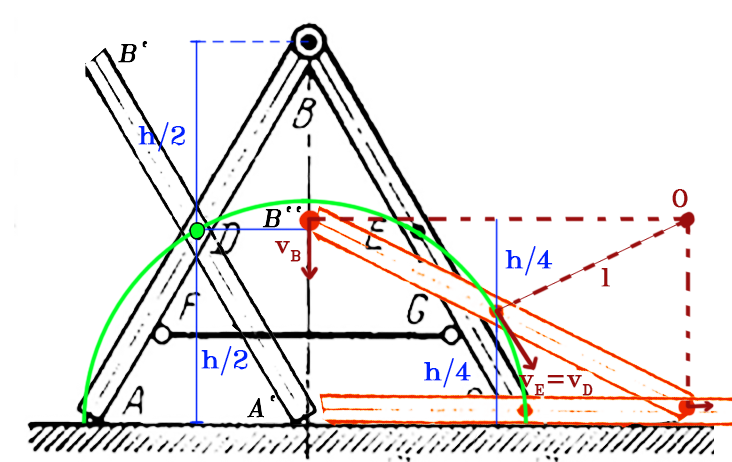
<style>
.page{position:relative;width:732px;height:462px;background:#ffffff}
.page>*{position:absolute;margin:0}
.t1{font:24px "SWRomnt";color:#000000;font-weight:bold;font-style:italic}
.t2{font:24px "SWRomnt";color:#0022ff;font-weight:bold}
.t3{font:24px "SWRomnt";color:#0022ff;font-weight:bold;scale:0.59 1}
.t4{font:24px "SWRomnt";color:#9a0d0d;font-weight:bold}
.t5{font:24px "SWRomnt";color:#9b0d0d;font-weight:bold}
</style>
<div class="page">
<p class="t1" style="left:118px;top:41px;width:30px;height:22px">B`</p>
<p class="t2" style="left:138px;top:122px;width:47px;height:30px">h<span class="t3">/</span>2</p>
<p class="t4" style="left:672px;top:189px;width:16px;height:19px">O</p>
<p class="t1" style="left:262px;top:206px;width:40px;height:22px">B``</p>
<p class="t4" style="left:274px;top:241px;width:27px;height:21px">vB</p>
<p class="t2" style="left:505px;top:246px;width:48px;height:30px">h<span class="t3">/</span>4</p>
<p class="t5" style="left:601px;top:268px;width:9px;height:19px">l</p>
<p class="t2" style="left:201px;top:346px;width:47px;height:30px">h<span class="t3">/</span>2</p>
<p class="t2" style="left:424px;top:358px;width:47px;height:30px">h<span class="t3">/</span>4</p>
<p class="t4" style="left:518px;top:375px;width:75px;height:21px">vE=vD</p>
<p class="t1" style="left:247px;top:395px;width:29px;height:23px">A`</p>
</div>
